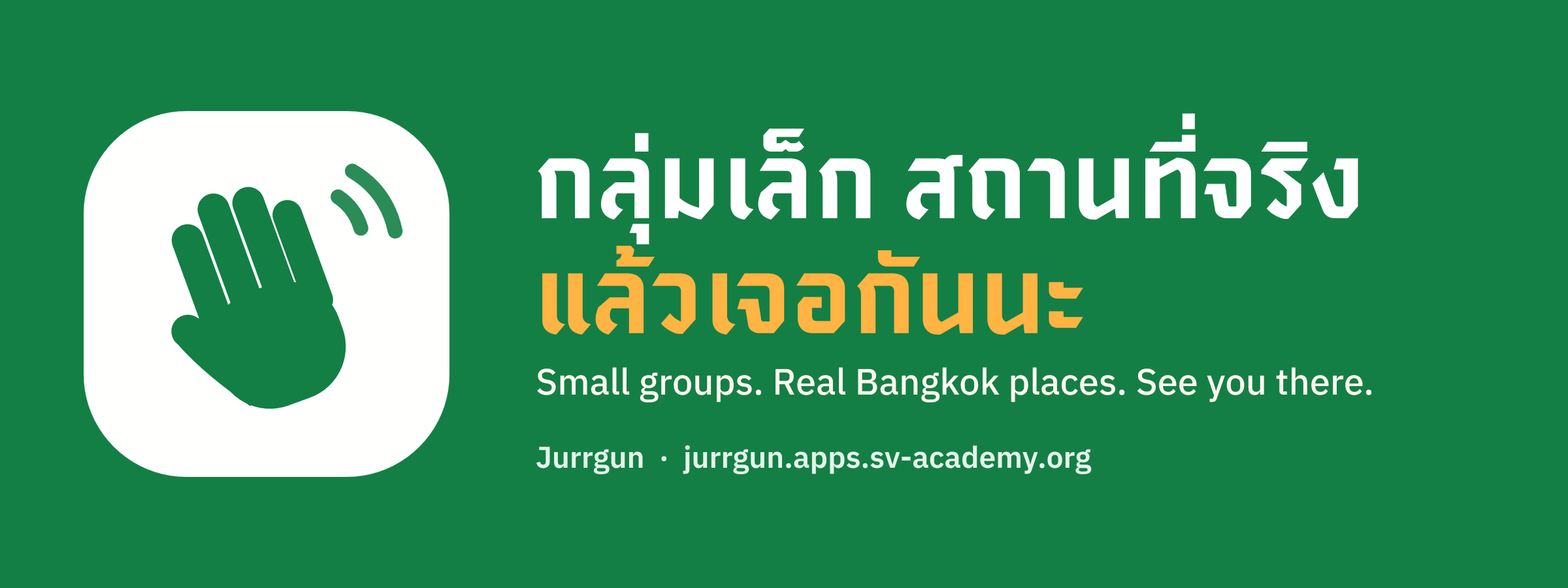
<style>
.page{position:relative;width:1568px;height:588px;background:#137f45}
.page>*{position:absolute;margin:0}
.t1{font:98px "SaoChingcha-Bold";color:#ffffff}
.t2{font:98px "SaoChingcha-Bold";color:#ffb443}
.t3{font:36.6px "Anuphan-Medium";color:#fff9f0}
.t4{font:30.1px "Anuphan-SemiBold";color:#e3f5ea}
</style>
<div class="page">
<p class="t1" style="left:537px;top:113px;width:822px;height:132px">กลุ่มเล็ก สถานที่จริง</p>
<p class="t2" style="left:542px;top:246px;width:542px;height:90px">แล้วเจอกันนะ</p>
<p class="t3" style="left:536px;top:367px;width:836px;height:36px">Small groups. Real Bangkok places. See you there.</p>
<p class="t4" style="left:536px;top:445px;width:556px;height:30px">Jurrgun  ·  jurrgun.apps.sv-academy.org</p>
</div>
